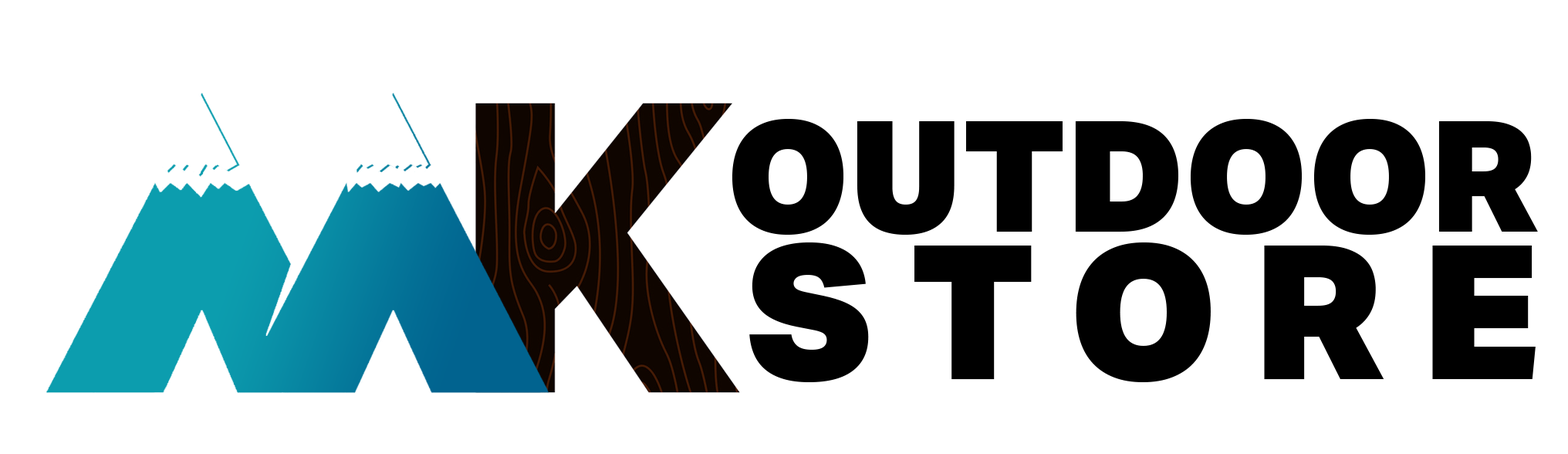
<style>
.page{position:relative;width:1568px;height:454px;background:#ffffff}
.page>*{position:absolute;margin:0}
.t1{font:154.3px "AktivGrotesk-Black";color:#000000}
.t2{font:186.5px "AktivGrotesk-Black";letter-spacing:0.2em;color:#000000}
</style>
<div class="page">
<p class="t1" style="left:732px;top:119px;width:806px;height:116px">OUTDOOR</p>
<p class="t2" style="left:749px;top:242px;width:787px;height:140px">STORE</p>
</div>
